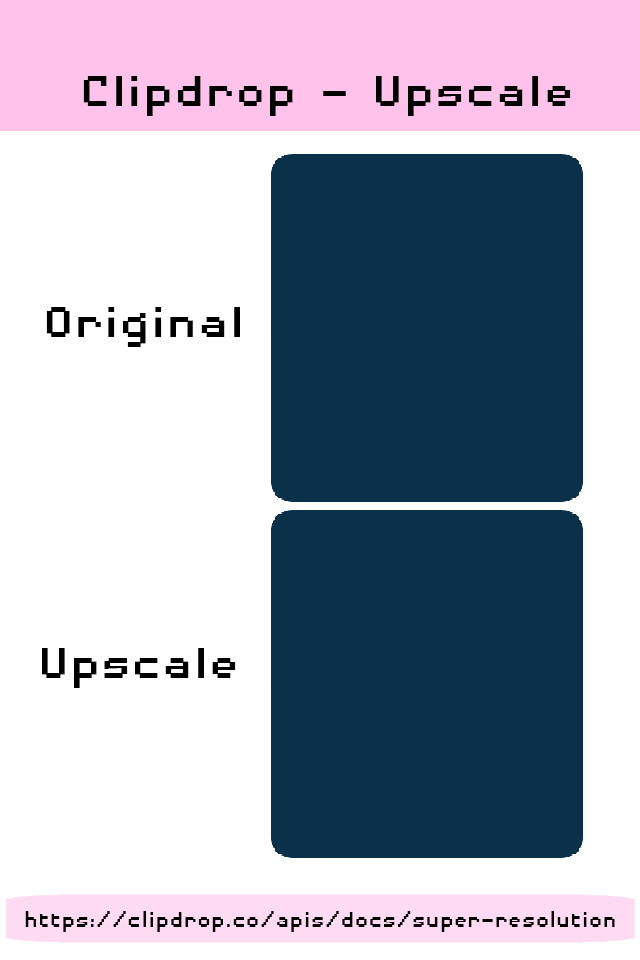
<style>
.page{position:relative;width:640px;height:960px;background:#ffffff}
.page>*{position:absolute;margin:0}
.t1{font:55.8px "DisposableDroidBB";color:#000000;scale:1.14 1}
.t2{font:28.8px "DisposableDroidBB";color:#000000}
</style>
<div class="page">
<p class="t1" style="left:83px;top:76px;width:488px;height:40px">Clipdrop - Upscale</p>
<p class="t1" style="left:46px;top:307px;width:194px;height:40px">Original</p>
<p class="t1" style="left:42px;top:648px;width:194px;height:40px">Upscale</p>
<p class="t2" style="left:25px;top:911px;width:590px;height:21px">https://clipdrop.co/apis/docs/super-resolution</p>
</div>
